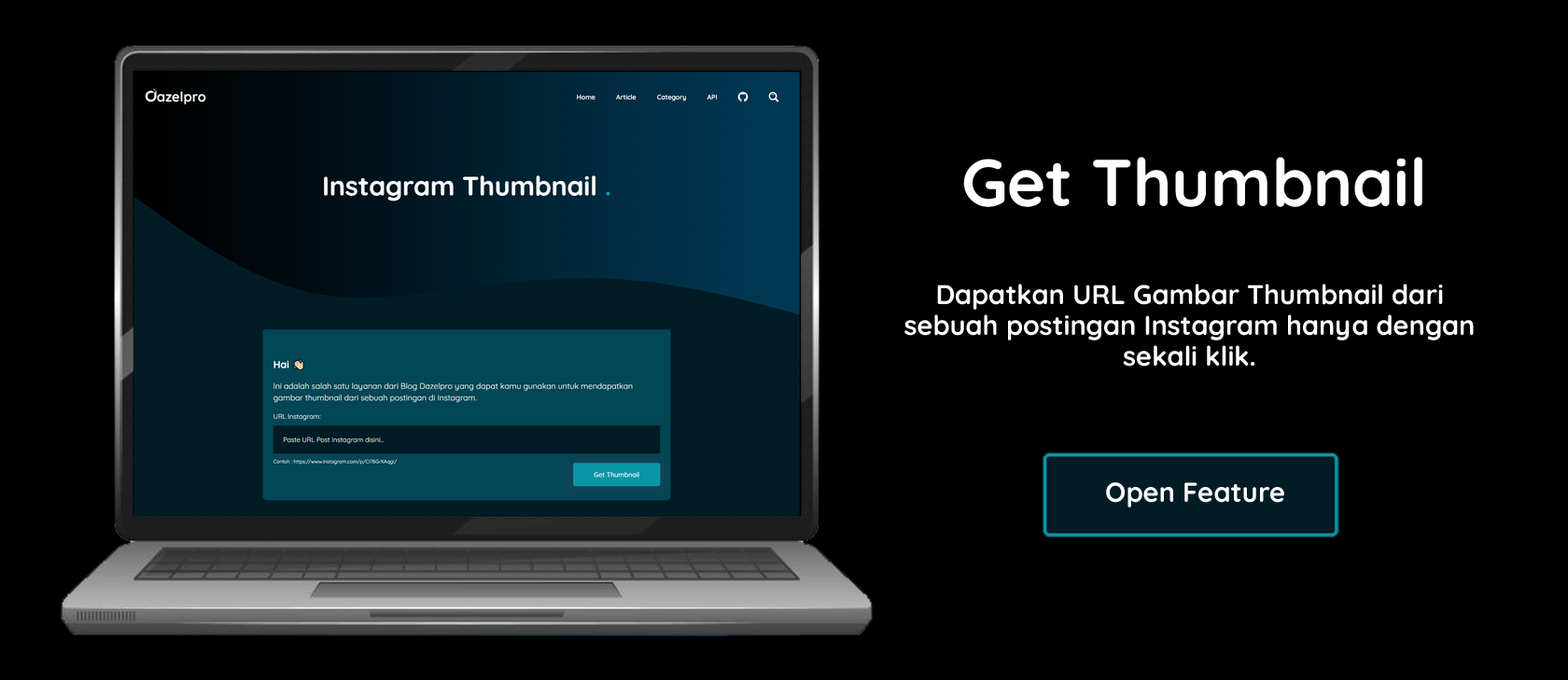
<style>
.page{position:relative;width:1568px;height:680px;background:#000000}
.page>*{position:absolute;margin:0}
.t1{font:66.3px "Quicksand-Bold";color:#ffffff}
.t2{font:27.1px/30.8px "Quicksand-Bold";color:#ffffff}
.t3{font:27.4px "Quicksand-Bold";color:#ffffff}
</style>
<div class="page">
<p class="t1" style="left:963px;top:157px;width:459px;height:50px">Get Thumbnail</p>
<p class="t2" style="left:904px;top:284px;width:570px;height:83px;text-align:center">Dapatkan URL Gambar Thumbnail dari sebuah postingan Instagram hanya dengan sekali klik.</p>
<p class="t3" style="left:1106px;top:483px;width:178px;height:25px">Open Feature</p>
</div>
